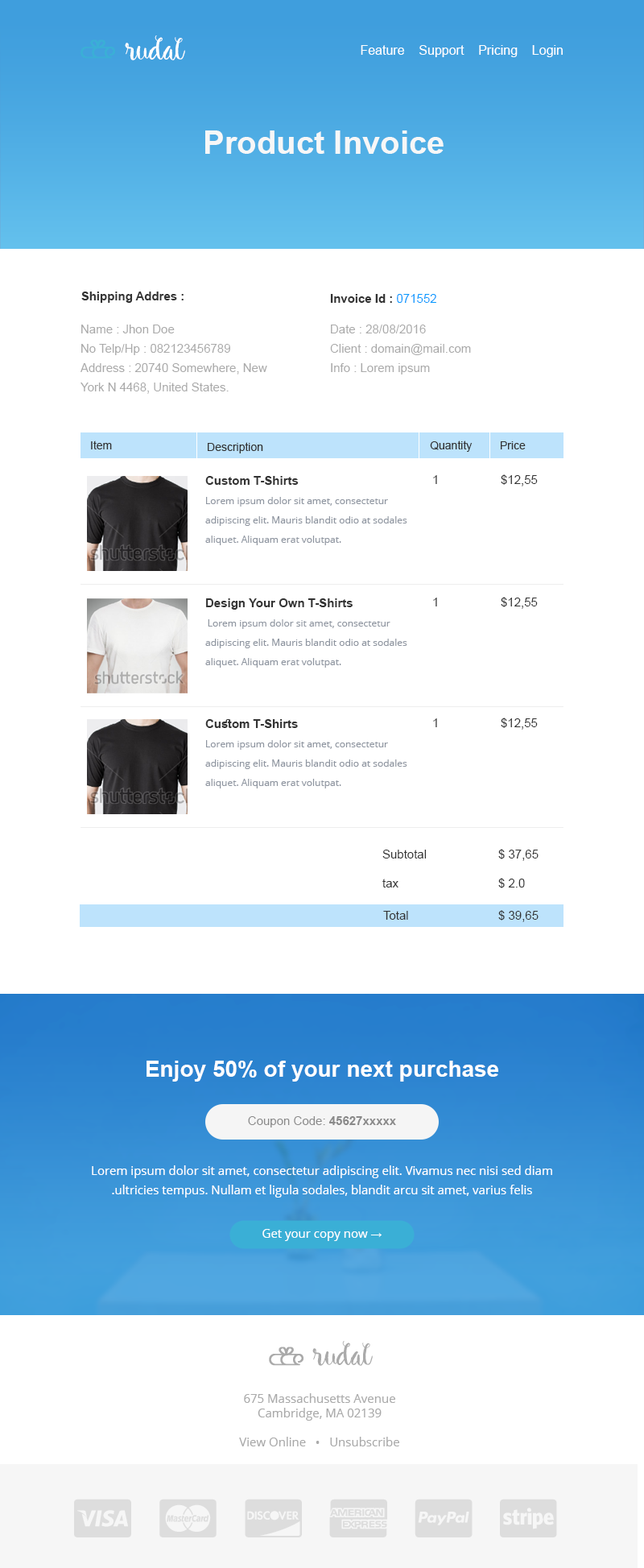
<style>
.page{position:relative;width:644px;height:1568px;background:#ffffff}
.page>*{position:absolute;margin:0}
.t1{font:29px "Harrlems";color:#ffffff}
.t2{font:12.9px "ArialMT";color:#ffffff}
.t3{font:32.2px "Arial-BoldMT";color:#f7f7f7}
.t4{font:12.1px "Arial-BoldMT";color:#333333}
.t5{font:12.1px "ArialMT";color:#0099ff}
.t6{font:12.1px/19.3px "ArialMT";color:#aaaaaa}
.t7{font:11.3px "ArialMT";color:#333333}
.t8{font:9.7px/19.3px "OpenSans";color:#8f96a1}
.t9{font:12.1px "ArialMT";color:#333333}
.t10{font:12.1px/29px "ArialMT";color:#333333}
.t11{font:22.5px "Arial-BoldMT";color:#ffffff}
.t12{font:12.1px "ArialMT";color:#8a8a8a}
.t13{font:12.1px "Arial-BoldMT";color:#8a8a8a}
.t14{font:12.1px/19.3px "OpenSans";color:#ffffff}
.t15{font:12.1px "OpenSans";color:#ffffff}
.t16{font:11.3px "Arial-BoldMT";color:#ffffff}
.t17{font:29px "Harrlems";color:#aaaaaa}
.t18{font:12.1px "OpenSans";color:#aaaaaa}
</style>
<div class="page">
<p class="t1" style="left:125px;top:35px;width:60px;height:25px">rudal</p>
<p class="t2" style="left:361px;top:45px;width:202px;height:12px">Feature    Support    Pricing    Login</p>
<p class="t3" style="left:205px;top:130px;width:239px;height:24px">Product Invoice</p>
<p class="t4" style="left:81px;top:292px;width:103px;height:11px">Shipping Addres :</p>
<p class="t4" style="left:330px;top:294px;width:106px;height:9px">Invoice Id : <span class="t5">071552</span></p>
<p class="t6" style="left:81px;top:325px;width:186px;height:69px">Name : Jhon Doe<br>No Telp/Hp : 082123456789<br>Address : 20740 Somewhere, New        York N 4468, United States.</p>
<p class="t6" style="left:330px;top:325px;width:141px;height:49px">Date : 28/08/2016<br>Client : domain@mail.com<br>Info : Lorem ipsum</p>
<p class="t7" style="left:91px;top:441px;width:21px;height:8px">Item</p>
<p class="t7" style="left:208px;top:442px;width:55px;height:11px">Description</p>
<p class="t7" style="left:430px;top:441px;width:43px;height:11px">Quantity</p>
<p class="t7" style="left:501px;top:441px;width:25px;height:8px">Price</p>
<p class="t8" style="left:205px;top:476px;width:203px;height:69px"><span class="t4">Custom T-Shirts<br></span>Lorem ipsum dolor sit amet, consectetur adipiscing elit. Mauris blandit odio at sodales aliquet. Aliquam erat volutpat.</p>
<p class="t9" style="left:433px;top:475px;width:4px;height:9px">1</p>
<p class="t9" style="left:501px;top:474px;width:37px;height:12px">$12,55</p>
<p class="t8" style="left:205px;top:598px;width:203px;height:70px"><span class="t4">Design Your Own T-Shirts<br> </span>Lorem ipsum dolor sit amet, consectetur adipiscing elit. Mauris blandit odio at sodales aliquet. Aliquam erat volutpat.</p>
<p class="t9" style="left:433px;top:598px;width:4px;height:8px">1</p>
<p class="t9" style="left:501px;top:597px;width:37px;height:12px">$12,55</p>
<p class="t8" style="left:205px;top:719px;width:203px;height:69px"><span class="t4">Custom T-Shirts<br></span>Lorem ipsum dolor sit amet, consectetur adipiscing elit. Mauris blandit odio at sodales aliquet. Aliquam erat volutpat.</p>
<p class="t9" style="left:433px;top:718px;width:4px;height:9px">1</p>
<p class="t9" style="left:501px;top:718px;width:37px;height:12px">$12,55</p>
<p class="t10" style="left:383px;top:849px;width:156px;height:39px">Subtotal   $ 37,65<br>tax    $ 2.0</p>
<p class="t9" style="left:383px;top:911px;width:25px;height:9px">Total</p>
<p class="t9" style="left:499px;top:910px;width:40px;height:12px">$ 39,65</p>
<p class="t11" style="left:147px;top:1061px;width:352px;height:21px">Enjoy 50% of your next purchase</p>
<p class="t12" style="left:248px;top:1116px;width:148px;height:11px">Coupon Code: <span class="t13">45627xxxxx</span></p>
<p class="t14" style="left:92px;top:1165px;width:460px;height:33px;text-align:center">Lorem ipsum dolor sit amet, consectetur adipiscing elit. Vivamus nec nisi sed diam ultricies tempus. Nullam et ligula sodales, blandit arcu sit amet, varius felis.</p>
<p class="t15" style="left:263px;top:1229px;width:119px;height:12px">Get your copy now <span class="t16">→</span></p>
<p class="t17" style="left:312px;top:1341px;width:61px;height:25px">rudal</p>
<p class="t18" style="left:239px;top:1393px;width:160px;height:53px;text-align:center">675 Massachusetts Avenue<br>Cambridge, MA 02139 <br><br>View Online   •   Unsubscribe</p>
</div>
